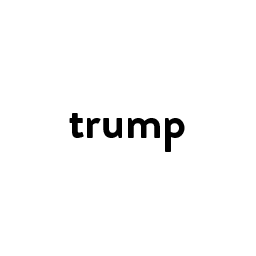
<style>
.page{position:relative;width:256px;height:256px;background:#ffffff}
.page>*{position:absolute;margin:0}
.t1{font:48px "BrandonGrotesque-Bold";color:#000000}
</style>
<div class="page">
<p class="t1" style="left:69px;top:113px;width:116px;height:39px">trump</p>
</div>
